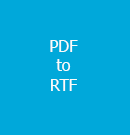
<style>
.page{position:relative;width:130px;height:135px;background:#00a8da}
.page>*{position:absolute;margin:0}
.t1{font:12px "Tahoma";color:#fcfcfa}
</style>
<div class="page">
<p class="t1" style="left:50px;top:40px;width:28px;height:51px;text-align:center">PDF<br>to<br>RTF</p>
</div>
